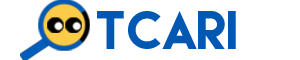
<style>
.page{position:relative;width:300px;height:60px;background:#ffffff}
.page>*{position:absolute;margin:0}
.t1{font:48.3px "LemonMilk";color:#0058b3}
.t2{font:48.3px "LemonMilk";color:#ffffff}
</style>
<div class="page">
<p class="t1" style="left:97px;top:11px;width:139px;height:38px"><span class="t2">            </span>TCARI</p>
</div>
